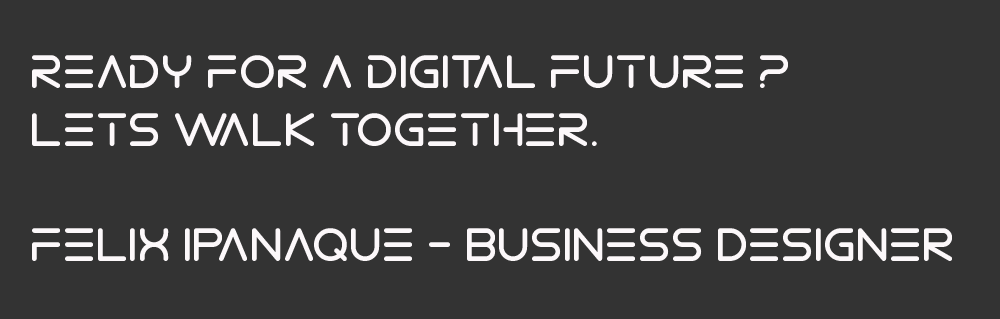
<style>
.page{position:relative;width:1000px;height:319px;background:#333333}
.page>*{position:absolute;margin:0}
.t1{font:48px "ElectroShackle";color:#fcf8fa}
</style>
<div class="page">
<p class="t1" style="left:32px;top:55px;width:920px;height:206px">ready for a dIGITal future ?<br>lets walk together.<br><br>feLIX IPaNaQUe - BUSINeSS DeSIGNeR</p>
</div>
